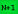
<style>
.page{position:relative;width:18px;height:14px;background:#00de2f}
.page>*{position:absolute;margin:0}
.t1{font:7.9px "CourierNewPSMT"}
</style>
<div class="page">
<p class="t1" style="left:1px;top:4px;width:14px;height:7px">N+1</p>
</div>
